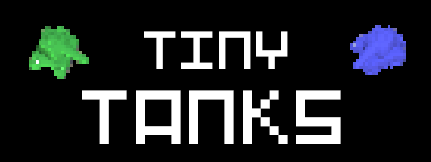
<style>
.page{position:relative;width:431px;height:162px;background:#000000}
.page>*{position:absolute;margin:0}
.t1{font:50px "Pixel-Art";color:#ffffff}
.t2{font:71.2px "Pixel-Art";color:#ffffff}
</style>
<div class="page">
<p class="t1" style="left:144px;top:31px;width:144px;height:38px">TINY</p>
<p class="t2" style="left:82px;top:90px;width:259px;height:54px">TANKS</p>
</div>
